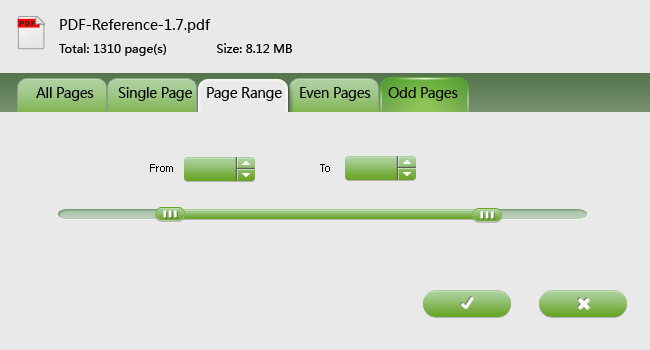
<style>
.page{position:relative;width:650px;height:350px;background:#e9e9e9}
.page>*{position:absolute;margin:0}
.t1{font:10px "System"}
.t2{font:14px "MicrosoftYaHei";color:#000000}
.t3{font:12px "MicrosoftYaHei";color:#000000}
.t4{font:14px "MicrosoftYaHei";letter-spacing:-0.025em;color:#000000}
.t5{font:11px "Tahoma";color:#000000}
</style>
<div class="page">
<p class="t1" style="left:19px;top:21px;width:17px;height:5px">PDF</p>
<p class="t2" style="left:60px;top:19px;width:151px;height:14px">PDF-Reference-1.7.pdf</p>
<p class="t3" style="left:59px;top:43px;width:233px;height:13px">Total: 1310 page(s)              Size: 8.12 MB</p>
<p class="t4" style="left:36px;top:87px;width:58px;height:14px">All Pages</p>
<p class="t4" style="left:118px;top:87px;width:74px;height:14px">Single Page</p>
<p class="t4" style="left:207px;top:87px;width:75px;height:14px">Page Range</p>
<p class="t4" style="left:300px;top:87px;width:71px;height:14px">Even Pages</p>
<p class="t4" style="left:388px;top:87px;width:70px;height:14px">Odd Pages</p>
<p class="t5" style="left:150px;top:164px;width:23px;height:8px">From</p>
<p class="t5" style="left:320px;top:164px;width:10px;height:8px">To</p>
</div>
